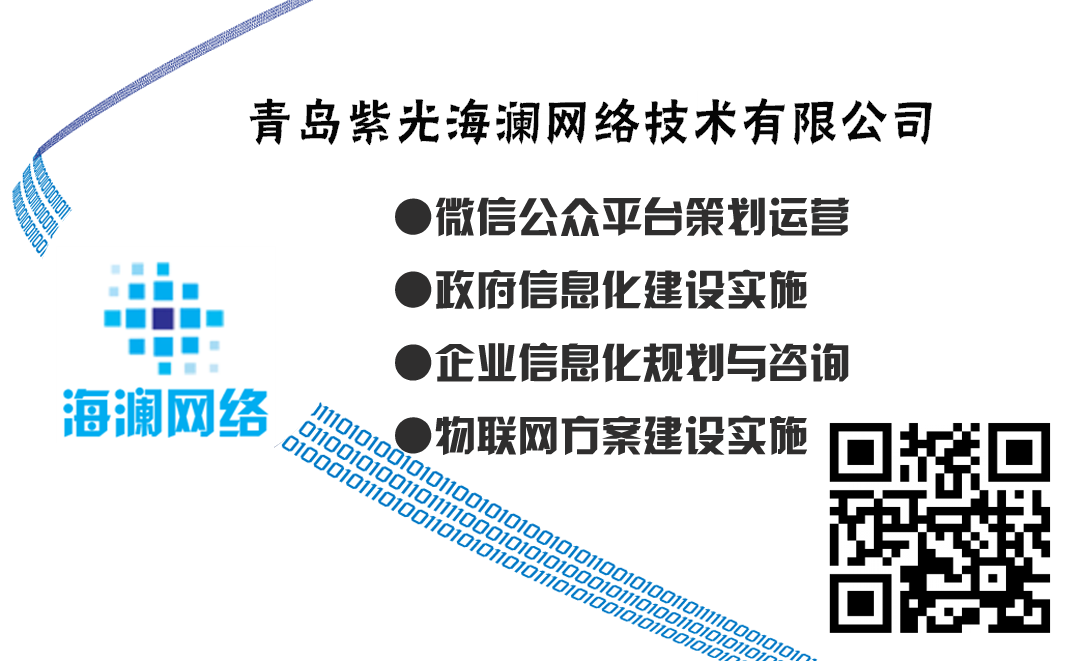
<style>
.page{position:relative;width:1086px;height:661px;background:#ffffff}
.page>*{position:absolute;margin:0}
.t1{font:41.7px "HYk2gj";color:#2f2e2e}
</style>
<div class="page">
<p class="t1" style="left:395px;top:196px;width:455px;height:259px">●微信公众平台策划运营<br>●政府信息化建设实施<br>●企业信息化规划与咨询<br>●物联网方案建设实施</p>
</div>
